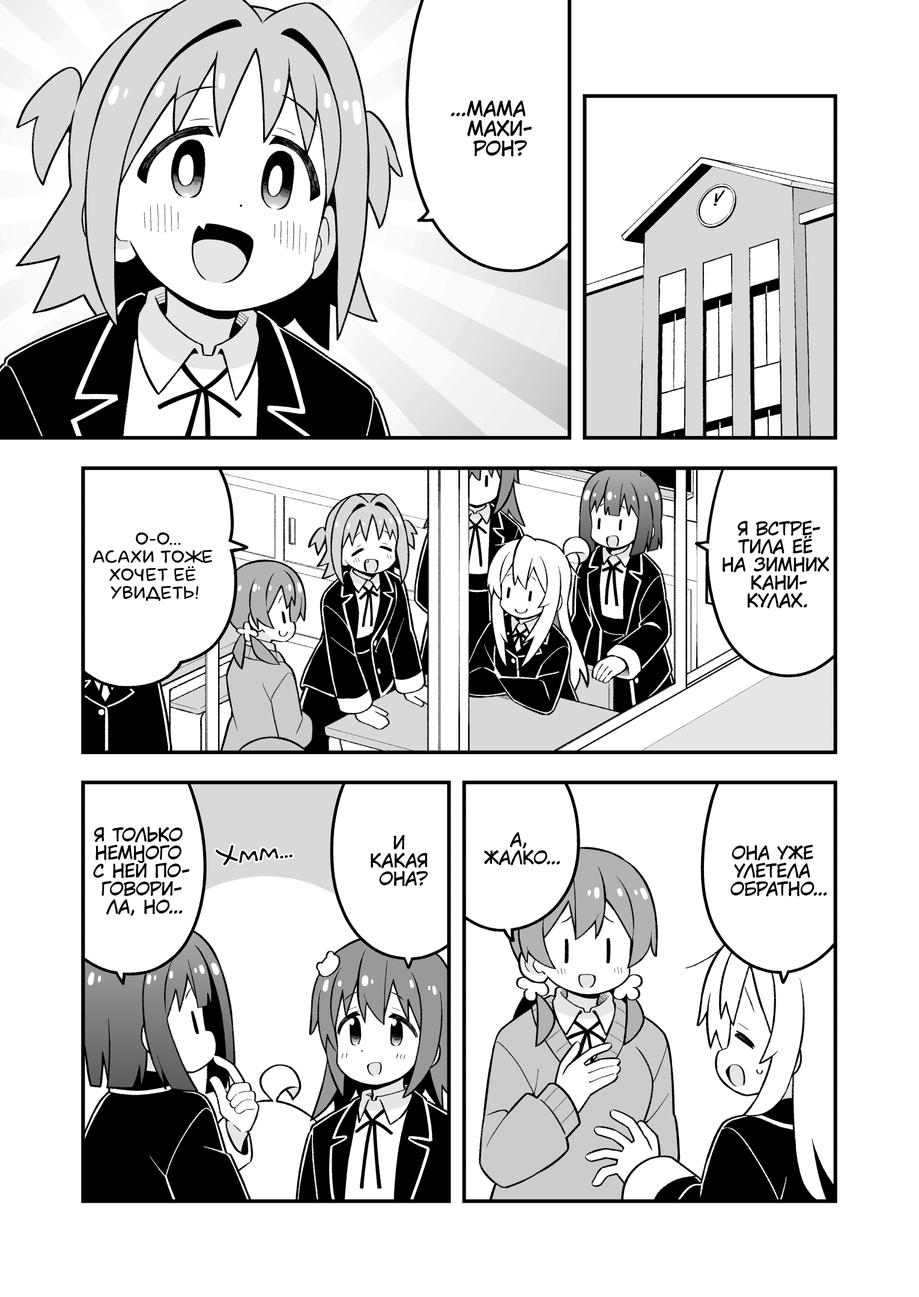
<style>
.page{position:relative;width:919px;height:1297px;background:#ffffff}
.page>*{position:absolute;margin:0}
.t1{font:19.8px "KuraiVoice2";color:#000000;text-transform:uppercase}
.t2{font:18px "KuraiVoice2";color:#000000;text-transform:uppercase}
.t3{font:18px "laCartoonerie";color:#000000;text-transform:uppercase}
.t4{font:25.2px "v_Augie";color:#000000}
</style>
<div class="page">
<p class="t1" style="left:451px;top:100px;width:81px;height:57px;text-align:center">...Мама<br>Махи-<br>рон?</p>
<p class="t2" style="left:723px;top:521px;width:107px;height:87px;text-align:center">Я встре-<br>тила её<br>на зимних<br>кани-<br>кулах.</p>
<p class="t3" style="left:93px;top:532px;width:120px;height:69px;text-align:center">О-о...<br>Асахи тоже<br>хочет её<br>увидеть!</p>
<p class="t2" style="left:93px;top:827px;width:96px;height:89px;text-align:center">Я только<br>немного<br>с ней по-<br>говори-<br>ла, но...</p>
<p class="t2" style="left:484px;top:832px;width:76px;height:34px;text-align:center">А,<br>жалко...</p>
<p class="t4" style="left:216px;top:845px;width:77px;height:21px;rotate:-7deg">Хмм...</p>
<p class="t2" style="left:371px;top:835px;width:57px;height:52px;text-align:center">И<br>какая<br>она?</p>
<p class="t2" style="left:730px;top:845px;width:97px;height:52px;text-align:center">Она уже<br>улетела<br>обратно...</p>
</div>
